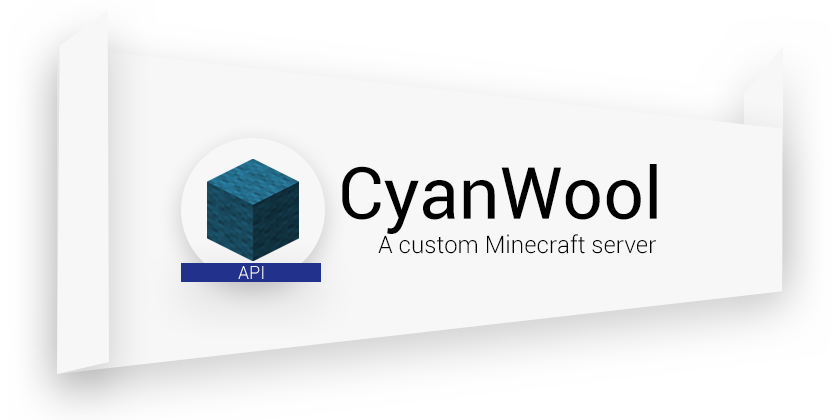
<style>
.page{position:relative;width:840px;height:420px;background:#f7f7f7}
.page>*{position:absolute;margin:0}
.t1{font:72px "Roboto-Regular";color:#000000}
.t2{font:24px "Roboto-Light";color:#000000}
.t3{font:18px "Roboto-Light";color:#f8f8f8}
</style>
<div class="page">
<p class="t1" style="left:342px;top:164px;width:315px;height:70px">CyanWool</p>
<p class="t2" style="left:378px;top:234px;width:278px;height:20px">A custom Minecraft server</p>
<p class="t3" style="left:238px;top:266px;width:26px;height:13px">API</p>
</div>
